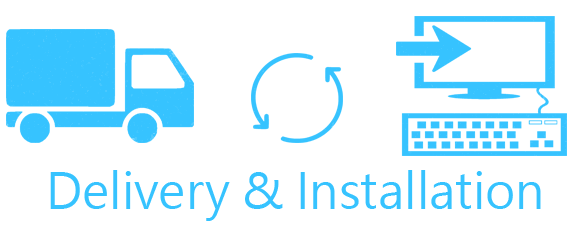
<style>
.page{position:relative;width:574px;height:229px;background:#ffffff}
.page>*{position:absolute;margin:0}
.t1{font:48px "MicrosoftJhengHeiUIRegular";color:#36c3ff}
</style>
<div class="page">
<p class="t1" style="left:50px;top:170px;width:491px;height:51px">Delivery &amp; Installation</p>
</div>
